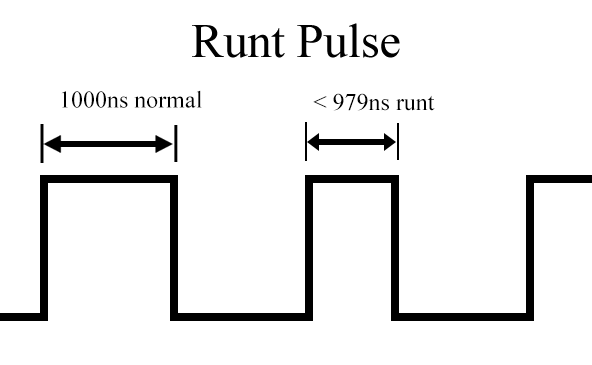
<style>
.page{position:relative;width:592px;height:365px;background:#ffffff}
.page>*{position:absolute;margin:0}
.t1{font:24px "TimesNewRomanPSMT";color:#000000}
</style>
<div class="page">
<p class="t1" style="left:61px;top:90px;width:141px;height:18px">1000ns normal</p>
<p class="t1" style="left:313px;top:93px;width:122px;height:18px">&lt; 979ns runt</p>
</div>
